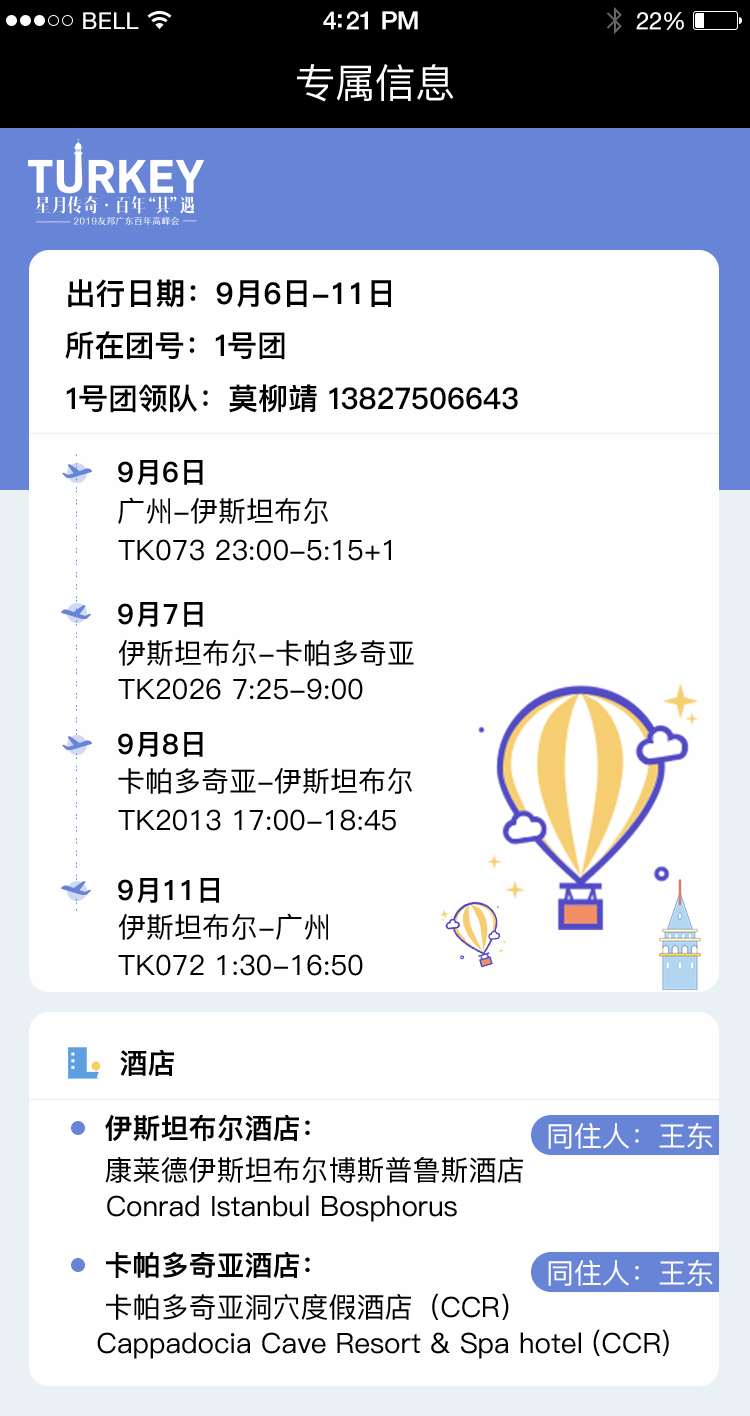
<style>
.page{position:relative;width:750px;height:1416px;background:#fefefe}
.page>*{position:absolute;margin:0}
.t1{font:23px "HelveticaNeue";letter-spacing:0.02em;color:#ffffff}
.t2{font:25px "HelveticaNeue-Medium";letter-spacing:-0.02em;color:#ffffff}
.t3{font:24px "HelveticaNeue";letter-spacing:-0.02em;color:#ffffff}
.t4{font:40px "PingFang-SC-Regular";color:#ffffff}
.t5{font:30px "PingFang-SC-Semibold";color:#000000}
.t6{font:30px "PingFangSC-Semibold";color:#000000}
.t7{font:28px "PingFang-SC-Semibold";color:#000000}
.t8{font:28px "PingFang-SC-Regular";color:#000000}
.t9{font:28px "PingFangSC-Regular";color:#fefefe}
</style>
<div class="page">
<p class="t1" style="left:83px;top:12px;width:56px;height:17px">BELL</p>
<p class="t2" style="left:323px;top:11px;width:95px;height:19px">4:21 PM</p>
<p class="t3" style="left:636px;top:12px;width:48px;height:18px">22%</p>
<p class="t4" style="left:297px;top:64px;width:157px;height:38px">专属信息</p>
<p class="t5" style="left:68px;top:279px;width:323px;height:29px">出行日期：9月6日-11日</p>
<p class="t6" style="left:65px;top:331px;width:220px;height:29px">所在团号：1号团</p>
<p class="t6" style="left:66px;top:384px;width:452px;height:29px">1号团领队：莫柳靖 13827506643</p>
<p class="t7" style="left:118px;top:460px;width:85px;height:25px">9月6日</p>
<p class="t8" style="left:118px;top:497px;width:210px;height:27px">广州-伊斯坦布尔</p>
<p class="t8" style="left:118px;top:539px;width:273px;height:22px">TK073 23:00-5:15+1</p>
<p class="t7" style="left:118px;top:602px;width:85px;height:25px">9月7日</p>
<p class="t8" style="left:118px;top:639px;width:296px;height:27px">伊斯坦布尔-卡帕多奇亚</p>
<p class="t8" style="left:118px;top:678px;width:245px;height:22px">TK2026 7:25-9:00</p>
<p class="t7" style="left:118px;top:732px;width:85px;height:25px">9月8日</p>
<p class="t8" style="left:118px;top:767px;width:294px;height:27px">卡帕多奇亚-伊斯坦布尔</p>
<p class="t8" style="left:118px;top:809px;width:278px;height:22px">TK2013 17:00-18:45</p>
<p class="t7" style="left:118px;top:878px;width:101px;height:25px">9月11日</p>
<p class="t8" style="left:118px;top:913px;width:210px;height:27px">伊斯坦布尔-广州</p>
<p class="t8" style="left:118px;top:954px;width:245px;height:22px">TK072 1:30-16:50</p>
<p class="t7" style="left:120px;top:1049px;width:54px;height:27px">酒店</p>
<p class="t7" style="left:105px;top:1114px;width:205px;height:27px">伊斯坦布尔酒店：</p>
<p class="t9" style="left:548px;top:1122px;width:165px;height:27px">同住人：王东</p>
<p class="t8" style="left:105px;top:1156px;width:418px;height:27px">康莱德伊斯坦布尔博斯普鲁斯酒店</p>
<p class="t8" style="left:107px;top:1195px;width:350px;height:27px">Conrad Istanbul Bosphorus</p>
<p class="t7" style="left:106px;top:1251px;width:204px;height:27px">卡帕多奇亚酒店：</p>
<p class="t9" style="left:548px;top:1259px;width:165px;height:27px">同住人：王东</p>
<p class="t8" style="left:106px;top:1293px;width:403px;height:27px">卡帕多奇亚洞穴度假酒店（CCR）</p>
<p class="t8" style="left:97px;top:1329px;width:572px;height:30px">Cappadocia Cave Resort &amp; Spa hotel (CCR)</p>
</div>
